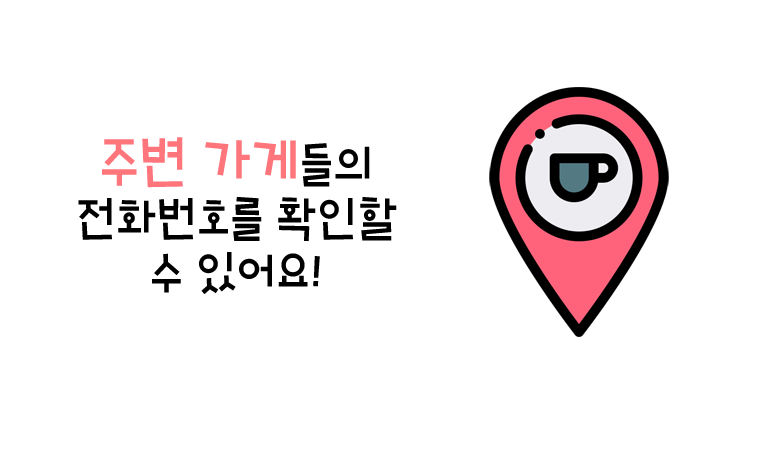
<style>
.page{position:relative;width:765px;height:454px;background:#ffffff}
.page>*{position:absolute;margin:0}
.t1{font:45px "HoonJungleR";color:#000000}
.t2{font:54px "HoonJungleR";color:#ff757c}
</style>
<div class="page">
<p class="t1" style="left:78px;top:137px;width:319px;height:157px;text-align:center"><span class="t2">주변 가게</span>들의  전화번호를 확인할 수 있어요!</p>
</div>
